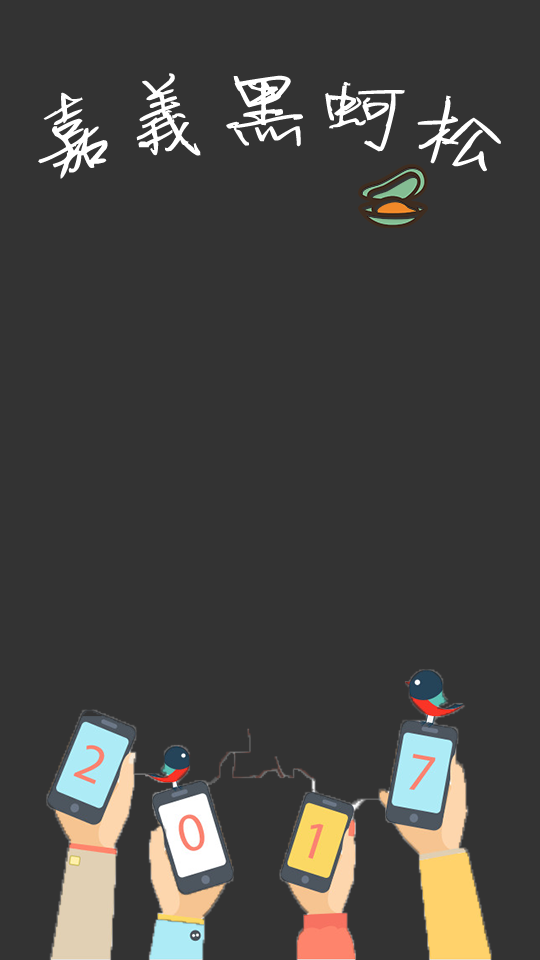
<style>
.page{position:relative;width:540px;height:960px;background:#333333}
.page>*{position:absolute;margin:0}
.t1{font:83.3px "SentyPea";color:#ffffff}
</style>
<div class="page">
<p class="t1" style="left:38px;top:73px;width:463px;height:106px">嘉義黑蚵松</p>
</div>
